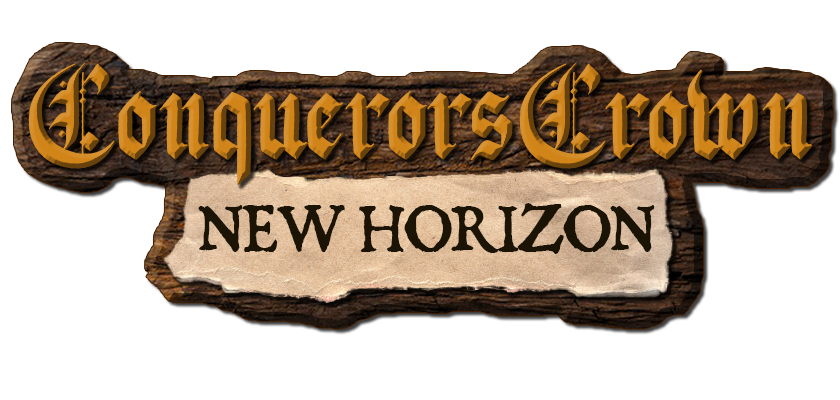
<style>
.page{position:relative;width:840px;height:400px;background:#ffffff}
.page>*{position:absolute;margin:0}
.t1{font:136px "Pauthe1st-Regular"}
.t2{font:55.9px "Dominican";color:#120b00}
</style>
<div class="page">
<p class="t1" style="left:28px;top:63px;width:785px;height:122px">ConquerorsCrown</p>
<p class="t2" style="left:198px;top:203px;width:457px;height:51px">NEW HORIZON</p>
</div>
